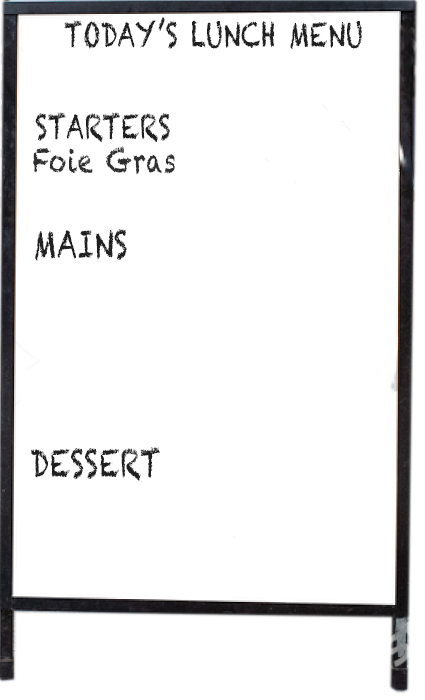
<style>
.page{position:relative;width:425px;height:700px;background:#ffffff}
.page>*{position:absolute;margin:0}
.t1{font:33.6px "Chalkduster";letter-spacing:0.025em;color:#1f1f1f;scale:0.71 1}
.t2{font:33.6px "Chalkduster";letter-spacing:0.025em;color:#2f2d2d;scale:0.71 1}
.t3{font:37.8px "Chalkduster";letter-spacing:0.025em;color:#1f1f1f;scale:0.71 1}
</style>
<div class="page">
<p class="t1" style="left:64px;top:17px;width:298px;height:33px">TODAY’S LUNCH MENU</p>
<p class="t1" style="left:35px;top:112px;width:135px;height:31px">STARTERS</p>
<p class="t2" style="left:33px;top:146px;width:142px;height:29px">Foie Gras</p>
<p class="t3" style="left:35px;top:229px;width:92px;height:32px">MAINS</p>
<p class="t3" style="left:31px;top:447px;width:129px;height:34px">DESSERT</p>
</div>
